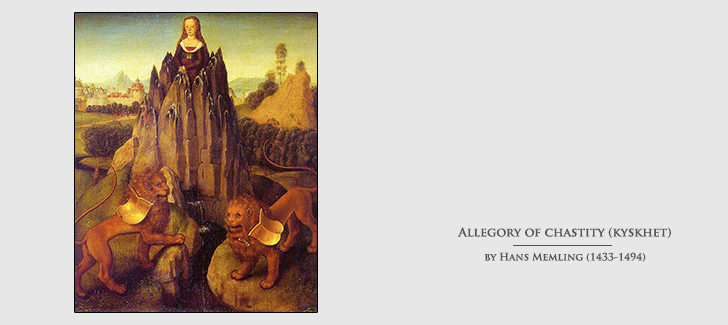
<style>
.page{position:relative;width:728px;height:325px;background:#e7e7e7}
.page>*{position:absolute;margin:0}
.t1{font:12px "TrajanPro-Bold";color:#535353}
.t2{font:10px "TrajanPro-Bold";color:#535353}
</style>
<div class="page">
<p class="t1" style="left:457px;top:227px;width:214px;height:35px;text-align:center">Allegory of chastity (kyskhet) <br><span class="t2"><br>by Hans Memling (1433-1494)</span></p>
</div>
